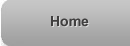
<style>
.page{position:relative;width:130px;height:46px}
.page>*{position:absolute;margin:0}
.t1{font:14px "Arial-BoldMT";color:#403f3f}
</style>
<div class="page">
<p class="t1" style="left:51px;top:16px;width:38px;height:11px">Home</p>
</div>
